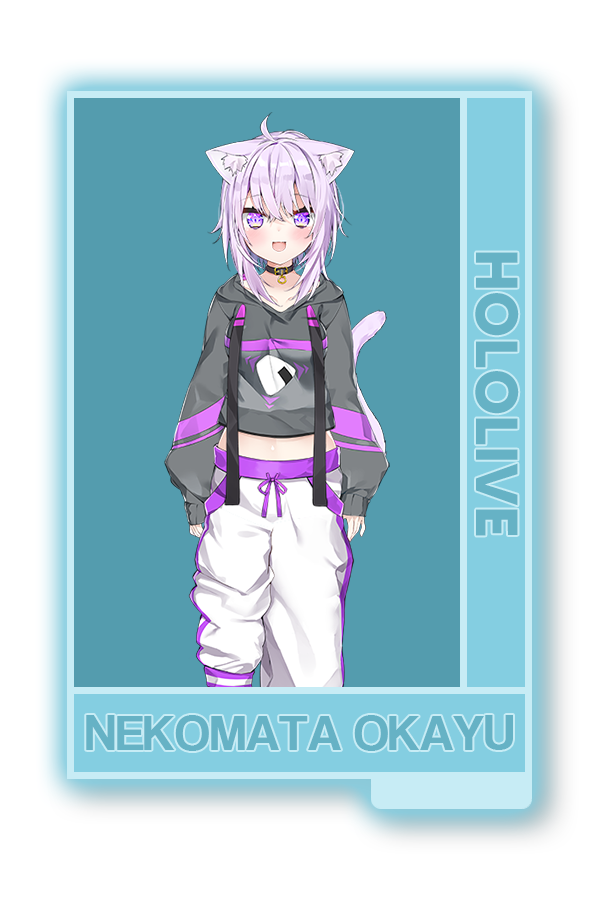
<style>
.page{position:relative;width:600px;height:900px;background:#549cae}
.page>*{position:absolute;margin:0}
.t1{font:59.2px "MADETOMMY-Bold";color:#66b2c5}
.t2{font:51.9px "CoolveticaRg-Regular";color:#66b2c5}
</style>
<div class="page">
<p class="t1" style="left:475px;top:252px;width:44px;height:284px;rotate:90deg">HOLOLIVE</p>
<p class="t2" style="left:86px;top:715px;width:427px;height:36px">NEKOMATA OKAYU</p>
</div>
